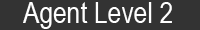
<style>
.page{position:relative;width:200px;height:30px;background:#333333}
.page>*{position:absolute;margin:0}
.t1{font:30px "ArialNarrow";color:#fefefe}
</style>
<div class="page">
<p class="t1" style="left:23px;top:2px;width:149px;height:27px">Agent Level 2</p>
</div>
